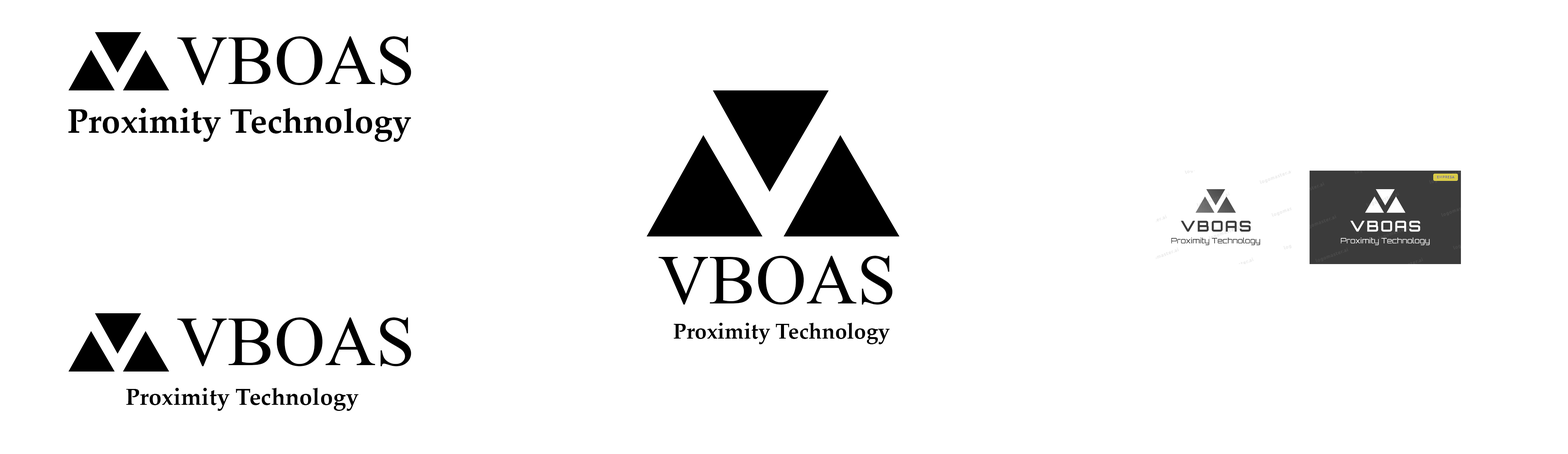
<style>
.page{position:relative;width:1568px;height:454px;background:#ffffff}
.page>*{position:absolute;margin:0}
.t1{font:70.2px "TimesNewRomanPSMT";color:#000000}
.t2{font:34.2px "PalatinoLinotype-Bold";color:#000000}
.t3{font:21.5px "PalatinoLinotype-Bold";color:#000000}
.t4{font:23.1px "PalatinoLinotype-Bold";color:#000000}
</style>
<div class="page">
<p class="t1" style="left:177px;top:36px;width:234px;height:49px">VBOAS</p>
<p class="t2" style="left:68px;top:108px;width:343px;height:34px">Proximity Technology</p>
<p class="t1" style="left:658px;top:256px;width:235px;height:49px">VBOAS</p>
<p class="t1" style="left:177px;top:317px;width:234px;height:49px">VBOAS</p>
<p class="t3" style="left:674px;top:323px;width:216px;height:21px">Proximity Technology</p>
<p class="t4" style="left:126px;top:388px;width:233px;height:23px">Proximity Technology</p>
</div>
